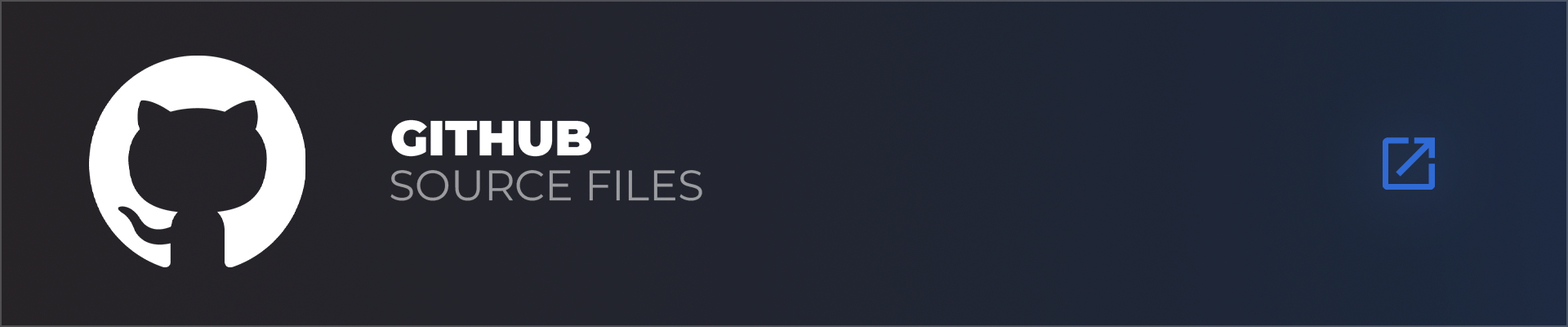
<style>
.page{position:relative;width:1568px;height:327px}
.page>*{position:absolute;margin:0}
.t1{font:49px "Montserrat-Black";color:#ffffff;text-transform:uppercase}
.t2{font:42.5px "Montserrat-Regular";color:#9c9ca0;text-transform:uppercase}
</style>
<div class="page">
<p class="t1" style="left:391px;top:119px;width:200px;height:38px">GitHub</p>
<p class="t2" style="left:390px;top:170px;width:312px;height:31px">Source files</p>
</div>
